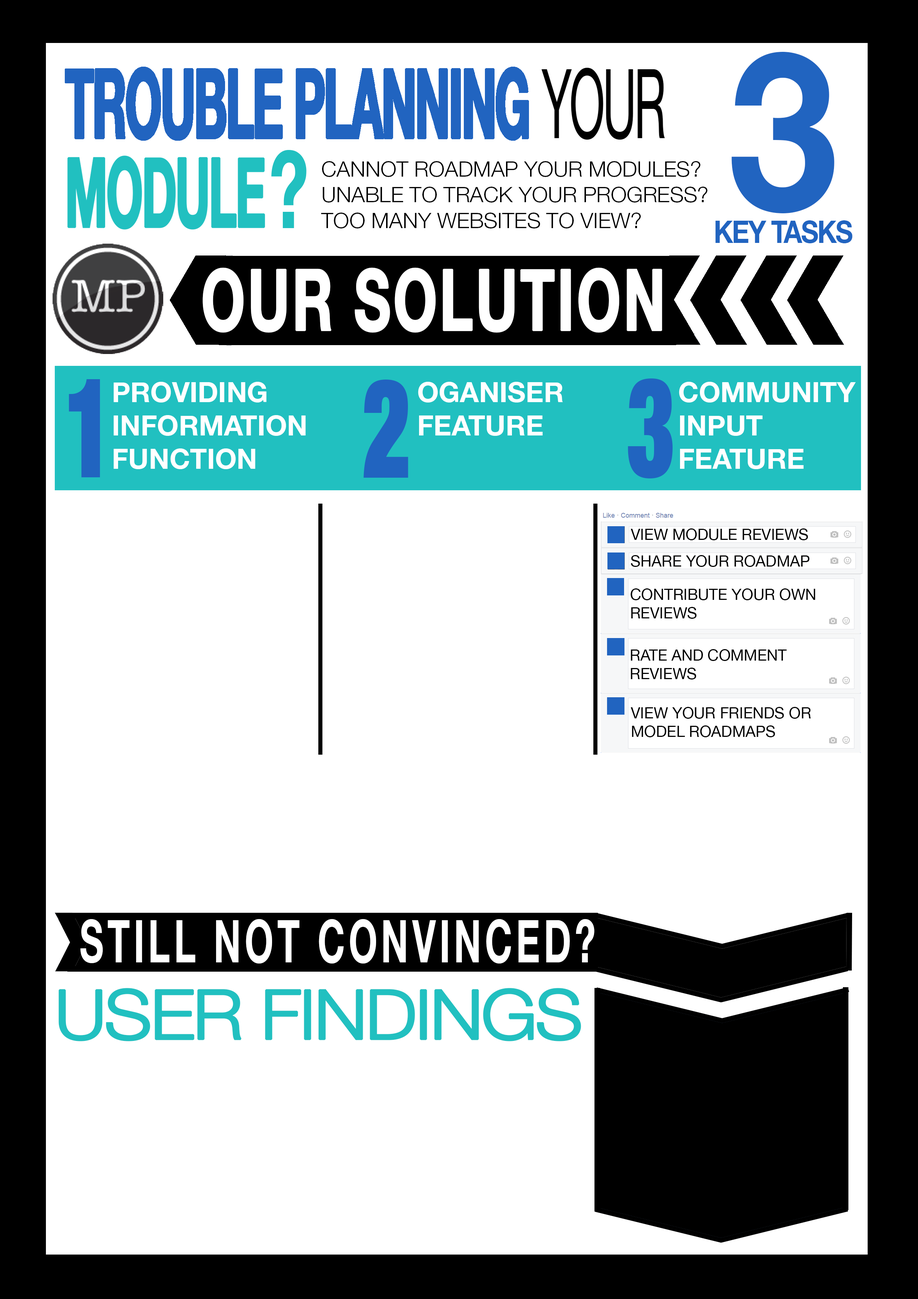
<style>
.page{position:relative;width:918px;height:1299px;background:#ffffff}
.page>*{position:absolute;margin:0}
.t1{font:222px "HelveticaNeue-Bold";letter-spacing:-0.05em;color:#2164c0;scale:0.89 1}
.t2{font:21.4px "HelveticaNeueLTPro-Lt";color:#000000}
.t3{font:31.3px "HelveticaNeue-Bold";letter-spacing:-0.05em;color:#2164c0;scale:0.87 1}
.t4{font:84.8px "HelveticaNeue-Bold";letter-spacing:0.025em;color:#ffffff;font-weight:bold;scale:0.66 1}
.t5{font:138.8px "HelveticaNeueLTStd-XBlkCn";color:#2164c0;scale:0.67 1}
.t6{font:27.8px "HelveticaNeue-Bold";color:#ffffff}
.t7{font:15.4px "HelveticaNeue";color:#000000}
.t8{font:15.5px "HelveticaNeue";color:#000000}
.t9{font:59.2px "HelveticaNeue-Bold";letter-spacing:0.1em;color:#ffffff;scale:0.62 1}
.t10{font:68.4px "HelveticaNeueLTPro-Lt";letter-spacing:-0.05em;color:#21c0c0;font-weight:bold;scale:1.1 1}
</style>
<div class="page">
<p class="t1" style="left:732px;top:52px;width:102px;height:161px">3</p>
<p class="t2" style="left:321px;top:161px;width:386px;height:67px;text-align:right">CANNOT ROADMAP YOUR MODULES?<br>UNABLE TO TRACK YOUR PROGRESS?<br>TOO MANY WEBSITES TO VIEW?</p>
<p class="t3" style="left:716px;top:220px;width:137px;height:23px">KEY TASKS</p>
<p class="t4" style="left:203px;top:267px;width:459px;height:66px">OUR SOLUTION</p>
<p class="t5" style="left:69px;top:379px;width:31px;height:98px">1</p>
<p class="t6" style="left:114px;top:382px;width:192px;height:87px;text-align:right">PROVIDING<br>INFORMATION<br>FUNCTION</p>
<p class="t5" style="left:364px;top:379px;width:44px;height:99px">2</p>
<p class="t6" style="left:418px;top:382px;width:145px;height:54px;text-align:right">OGANISER<br>FEATURE</p>
<p class="t5" style="left:628px;top:378px;width:45px;height:100px">3</p>
<p class="t6" style="left:679px;top:382px;width:177px;height:87px;text-align:right">COMMUNITY<br>INPUT<br>FEATURE</p>
<p class="t7" style="left:631px;top:528px;width:177px;height:12px">VIEW MODULE REVIEWS</p>
<p class="t7" style="left:631px;top:555px;width:179px;height:12px">SHARE YOUR ROADMAP</p>
<p class="t8" style="left:630px;top:588px;width:186px;height:31px;text-align:right">CONTRIBUTE YOUR OWN<br>REVIEWS</p>
<p class="t7" style="left:631px;top:649px;width:156px;height:30px;text-align:right">RATE AND COMMENT<br>REVIEWS</p>
<p class="t7" style="left:631px;top:707px;width:180px;height:30px;text-align:right">VIEW YOUR FRIENDS OR<br>MODEL ROADMAPS</p>
<p class="t9" style="left:80px;top:919px;width:515px;height:44px">STILL NOT CONVINCED?</p>
<p class="t10" style="left:58px;top:988px;width:523px;height:53px">USER FINDINGS</p>
</div>
